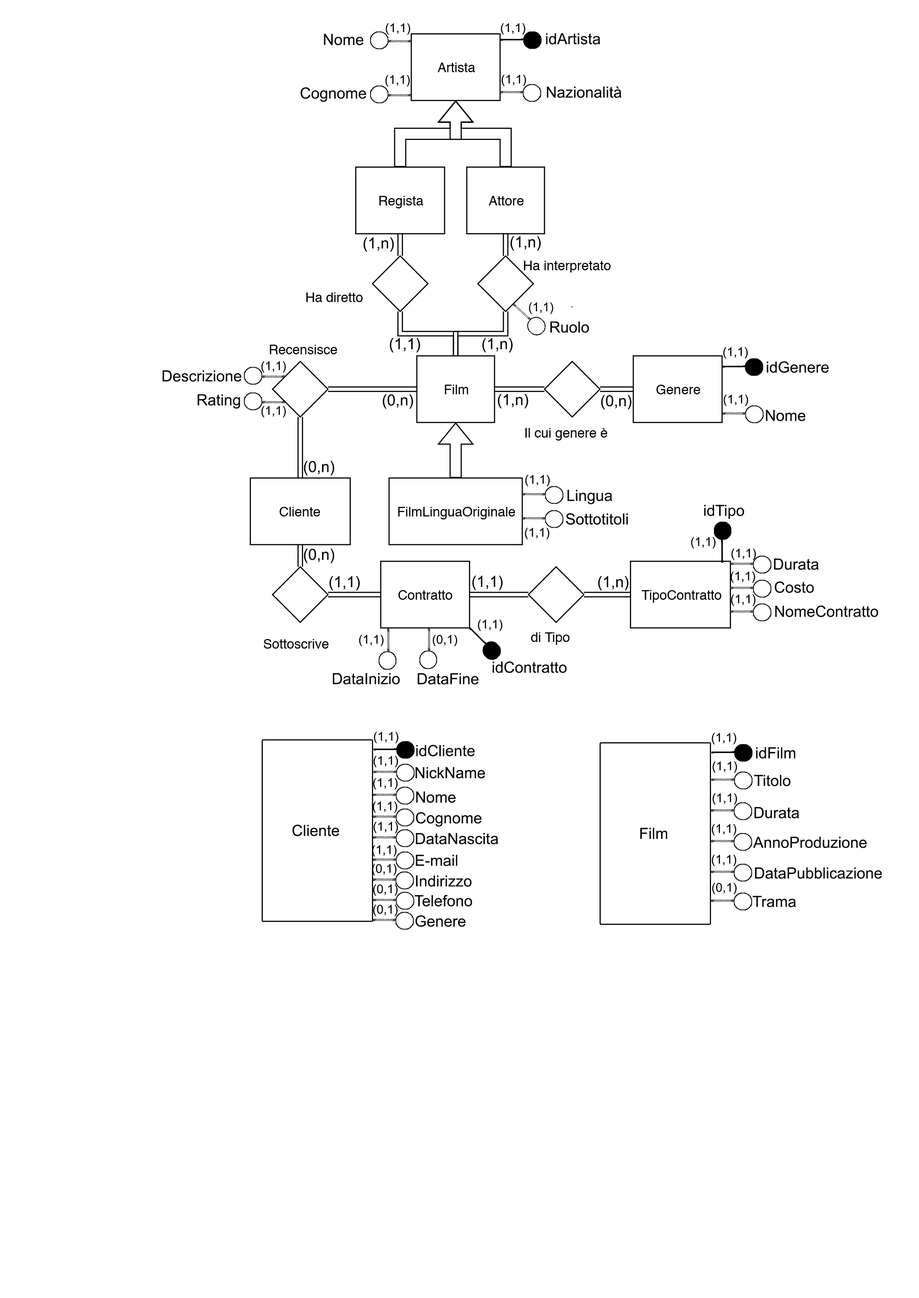
<style>
.page{position:relative;width:919px;height:1298px;background:#ffffff}
.page>*{position:absolute;margin:0}
.t1{font:12.2px "ArialMT";color:#050505}
.t2{font:15.4px "ArialMT";color:#050505}
.t3{font:12.3px "ArialMT";color:#050505}
</style>
<div class="page">
<p class="t1" style="left:386px;top:23px;width:24px;height:12px">(1,1)</p>
<p class="t1" style="left:501px;top:23px;width:25px;height:12px">(1,1)</p>
<p class="t2" style="left:324px;top:34px;width:39px;height:12px">Nome</p>
<p class="t2" style="left:546px;top:33px;width:54px;height:11px">idArtista</p>
<p class="t1" style="left:385px;top:75px;width:25px;height:12px">(1,1)</p>
<p class="t1" style="left:501px;top:74px;width:25px;height:12px">(1,1)</p>
<p class="t2" style="left:301px;top:87px;width:65px;height:15px">Cognome</p>
<p class="t2" style="left:547px;top:86px;width:74px;height:12px">Nazionalità</p>
<p class="t2" style="left:363px;top:237px;width:31px;height:15px">(1,n)</p>
<p class="t2" style="left:510px;top:236px;width:31px;height:15px">(1,n)</p>
<p class="t3" style="left:529px;top:302px;width:24px;height:12px">(1,1)</p>
<p class="t2" style="left:550px;top:321px;width:39px;height:12px">Ruolo</p>
<p class="t2" style="left:390px;top:338px;width:30px;height:14px">(1,1)</p>
<p class="t2" style="left:482px;top:338px;width:31px;height:14px">(1,n)</p>
<p class="t1" style="left:723px;top:347px;width:25px;height:12px">(1,1)</p>
<p class="t1" style="left:261px;top:361px;width:25px;height:12px">(1,1)</p>
<p class="t2" style="left:766px;top:361px;width:63px;height:12px">idGenere</p>
<p class="t2" style="left:162px;top:370px;width:79px;height:12px">Descrizione</p>
<p class="t2" style="left:198px;top:394px;width:42px;height:15px">Rating</p>
<p class="t2" style="left:383px;top:394px;width:30px;height:15px">(0,n)</p>
<p class="t2" style="left:498px;top:393px;width:30px;height:15px">(1,n)</p>
<p class="t2" style="left:601px;top:395px;width:30px;height:14px">(0,n)</p>
<p class="t1" style="left:724px;top:394px;width:24px;height:12px">(1,1)</p>
<p class="t1" style="left:261px;top:406px;width:25px;height:11px">(1,1)</p>
<p class="t2" style="left:766px;top:410px;width:39px;height:11px">Nome</p>
<p class="t2" style="left:304px;top:460px;width:30px;height:15px">(0,n)</p>
<p class="t1" style="left:525px;top:474px;width:25px;height:12px">(1,1)</p>
<p class="t2" style="left:567px;top:490px;width:45px;height:14px">Lingua</p>
<p class="t2" style="left:704px;top:504px;width:40px;height:15px">idTipo</p>
<p class="t2" style="left:566px;top:513px;width:62px;height:12px">Sottotitoli</p>
<p class="t1" style="left:525px;top:527px;width:25px;height:12px">(1,1)</p>
<p class="t1" style="left:691px;top:537px;width:25px;height:11px">(1,1)</p>
<p class="t2" style="left:304px;top:548px;width:30px;height:15px">(0,n)</p>
<p class="t1" style="left:731px;top:548px;width:25px;height:12px">(1,1)</p>
<p class="t2" style="left:774px;top:558px;width:45px;height:12px">Durata</p>
<p class="t2" style="left:329px;top:576px;width:31px;height:14px">(1,1)</p>
<p class="t2" style="left:472px;top:575px;width:31px;height:15px">(1,1)</p>
<p class="t2" style="left:598px;top:576px;width:30px;height:14px">(1,n)</p>
<p class="t1" style="left:731px;top:571px;width:24px;height:12px">(1,1)</p>
<p class="t2" style="left:775px;top:581px;width:39px;height:12px">Costo</p>
<p class="t1" style="left:731px;top:594px;width:25px;height:12px">(1,1)</p>
<p class="t2" style="left:775px;top:605px;width:103px;height:12px">NomeContratto</p>
<p class="t1" style="left:478px;top:619px;width:25px;height:12px">(1,1)</p>
<p class="t1" style="left:359px;top:634px;width:25px;height:12px">(1,1)</p>
<p class="t1" style="left:433px;top:634px;width:24px;height:12px">(0,1)</p>
<p class="t2" style="left:493px;top:661px;width:74px;height:12px">idContratto</p>
<p class="t2" style="left:333px;top:673px;width:67px;height:11px">DataInizio</p>
<p class="t2" style="left:417px;top:673px;width:62px;height:11px">DataFine</p>
<p class="t1" style="left:374px;top:731px;width:25px;height:12px">(1,1)</p>
<p class="t1" style="left:712px;top:732px;width:25px;height:12px">(1,1)</p>
<p class="t2" style="left:416px;top:744px;width:59px;height:12px">idCliente</p>
<p class="t2" style="left:756px;top:747px;width:39px;height:11px">idFilm</p>
<p class="t1" style="left:373px;top:755px;width:25px;height:12px">(1,1)</p>
<p class="t1" style="left:712px;top:761px;width:25px;height:12px">(1,1)</p>
<p class="t2" style="left:415px;top:767px;width:70px;height:11px">NickName</p>
<p class="t1" style="left:373px;top:778px;width:25px;height:11px">(1,1)</p>
<p class="t2" style="left:754px;top:775px;width:37px;height:11px">Titolo</p>
<p class="t2" style="left:416px;top:791px;width:40px;height:12px">Nome</p>
<p class="t1" style="left:712px;top:793px;width:25px;height:12px">(1,1)</p>
<p class="t1" style="left:373px;top:801px;width:24px;height:12px">(1,1)</p>
<p class="t2" style="left:754px;top:806px;width:45px;height:12px">Durata</p>
<p class="t1" style="left:373px;top:821px;width:25px;height:12px">(1,1)</p>
<p class="t2" style="left:416px;top:812px;width:66px;height:14px">Cognome</p>
<p class="t2" style="left:292px;top:824px;width:47px;height:12px">Cliente</p>
<p class="t2" style="left:416px;top:833px;width:82px;height:11px">DataNascita</p>
<p class="t2" style="left:640px;top:828px;width:27px;height:11px">Film</p>
<p class="t1" style="left:712px;top:823px;width:25px;height:12px">(1,1)</p>
<p class="t1" style="left:372px;top:845px;width:25px;height:11px">(1,1)</p>
<p class="t2" style="left:753px;top:836px;width:114px;height:12px">AnnoProduzione</p>
<p class="t2" style="left:416px;top:854px;width:41px;height:12px">E-mail</p>
<p class="t1" style="left:712px;top:854px;width:25px;height:12px">(1,1)</p>
<p class="t1" style="left:372px;top:863px;width:25px;height:12px">(0,1)</p>
<p class="t2" style="left:755px;top:867px;width:127px;height:12px">DataPubblicazione</p>
<p class="t2" style="left:416px;top:875px;width:56px;height:11px">Indirizzo</p>
<p class="t1" style="left:373px;top:884px;width:25px;height:12px">(0,1)</p>
<p class="t1" style="left:712px;top:882px;width:25px;height:12px">(0,1)</p>
<p class="t1" style="left:373px;top:904px;width:25px;height:12px">(0,1)</p>
<p class="t2" style="left:415px;top:895px;width:57px;height:11px">Telefono</p>
<p class="t2" style="left:752px;top:895px;width:44px;height:12px">Trama</p>
<p class="t2" style="left:415px;top:915px;width:51px;height:12px">Genere</p>
</div>
